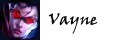
<style>
.page{position:relative;width:140px;height:40px;background:#ffffff}
.page>*{position:absolute;margin:0}
.t1{font:16px "VinerHandITC";color:#000000}
</style>
<div class="page">
<p class="t1" style="left:48px;top:13px;width:50px;height:21px">Vayne</p>
</div>
